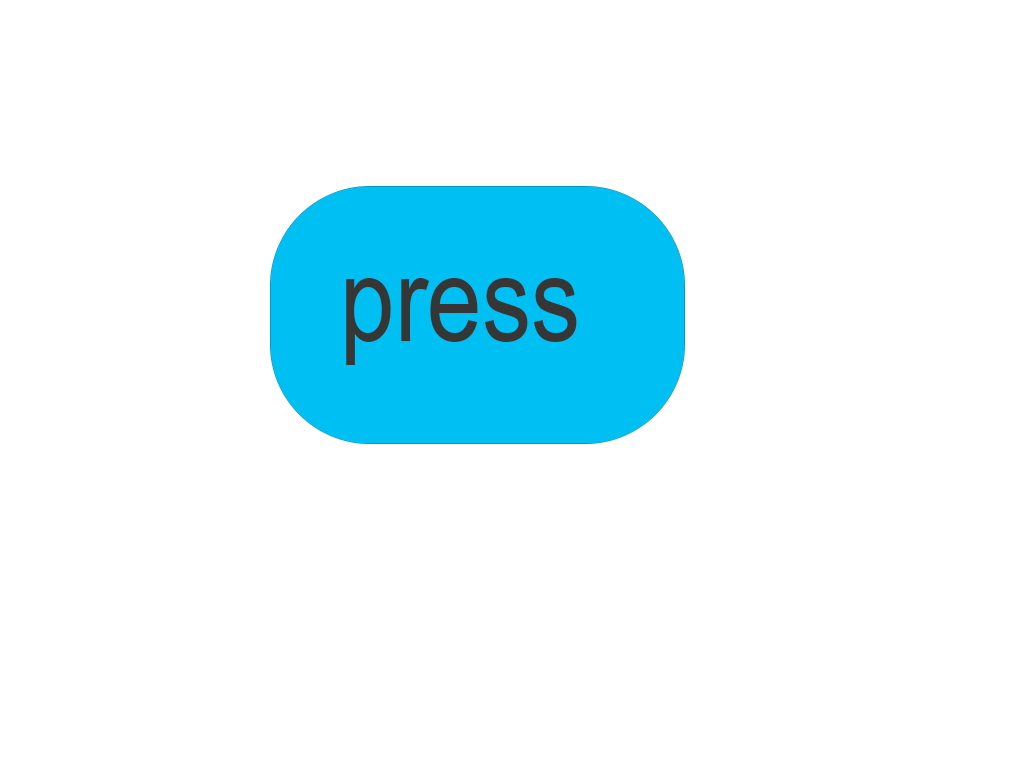
<style>
.page{position:relative;width:1024px;height:768px;background:#ffffff}
.page>*{position:absolute;margin:0}
.t1{font:120px "ArialNarrow";color:#363636}
</style>
<div class="page">
<p class="t1" style="left:346px;top:278px;width:231px;height:87px">press</p>
</div>
